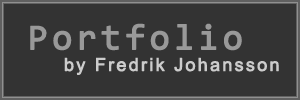
<style>
.page{position:relative;width:300px;height:100px;background:#333333}
.page>*{position:absolute;margin:0}
.t1{font:18px "ArialMT";letter-spacing:0.1em;color:#cccccc;font-weight:bold}
.t2{font:36px "Consolas";letter-spacing:0.1em;color:#999999;font-weight:bold}
</style>
<div class="page">
<p class="t1" style="left:30px;top:23px;width:249px;height:52px"><span class="t2">Portfolio<br></span> by Fredrik Johansson</p>
</div>
